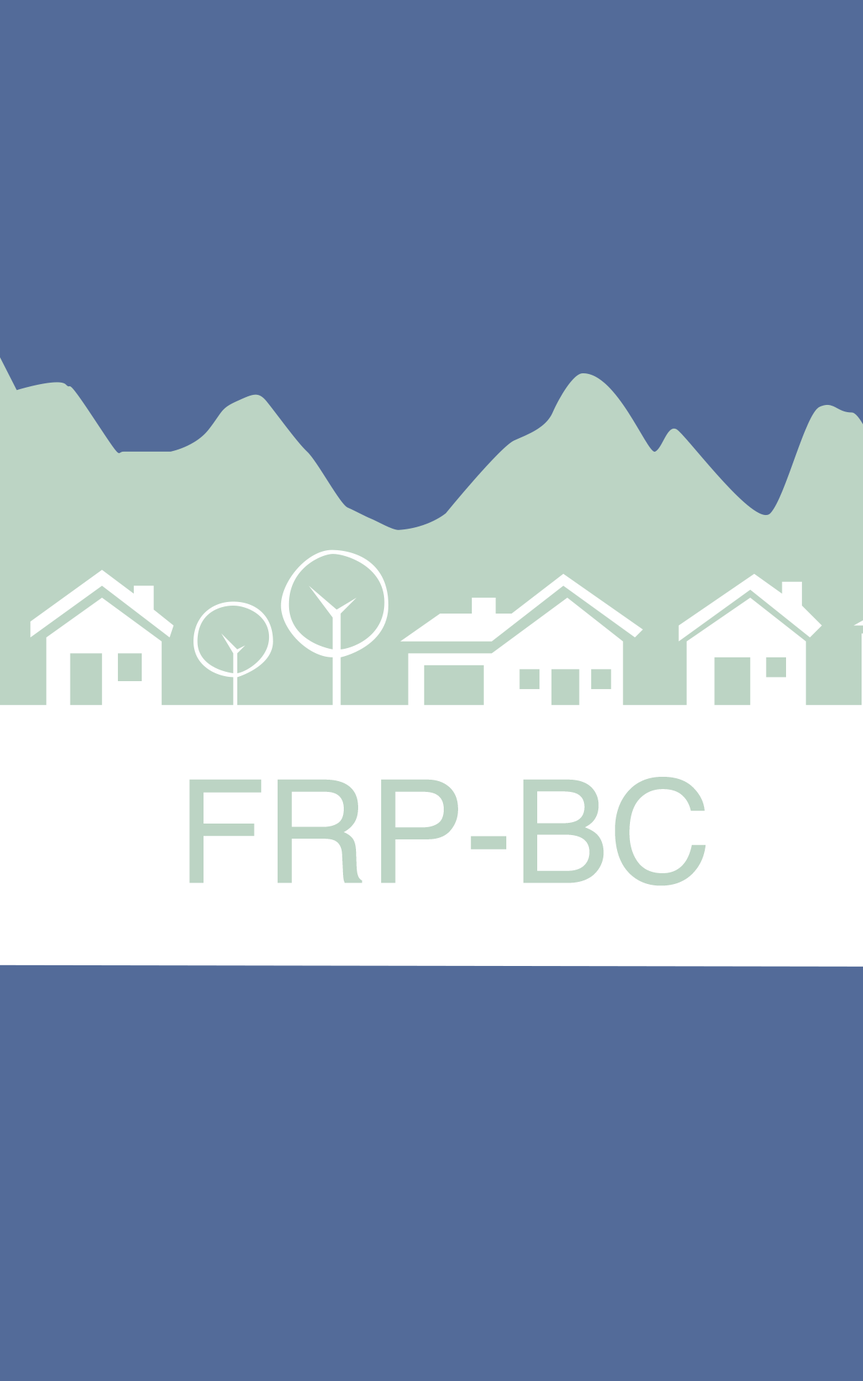
<style>
.page{position:relative;width:863px;height:1381px;background:#536b99}
.page>*{position:absolute;margin:0}
.t1{font:143.9px "Helvetica";color:#bcd4c4}
</style>
<div class="page">
<p class="t1" style="left:189px;top:777px;width:517px;height:109px">FRP-BC</p>
</div>
